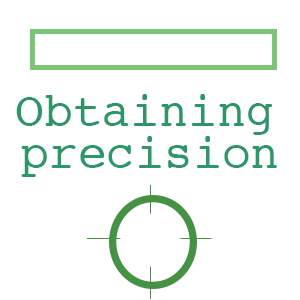
<style>
.page{position:relative;width:300px;height:300px;background:#ffffff}
.page>*{position:absolute;margin:0}
.t1{font:48px "Courier";color:#2c9668}
.t2{font:48px "Courier";color:#2c9869}
</style>
<div class="page">
<p class="t1" style="left:16px;top:94px;width:257px;height:41px">Obtaining</p>
<p class="t2" style="left:21px;top:136px;width:256px;height:41px">precision</p>
</div>
